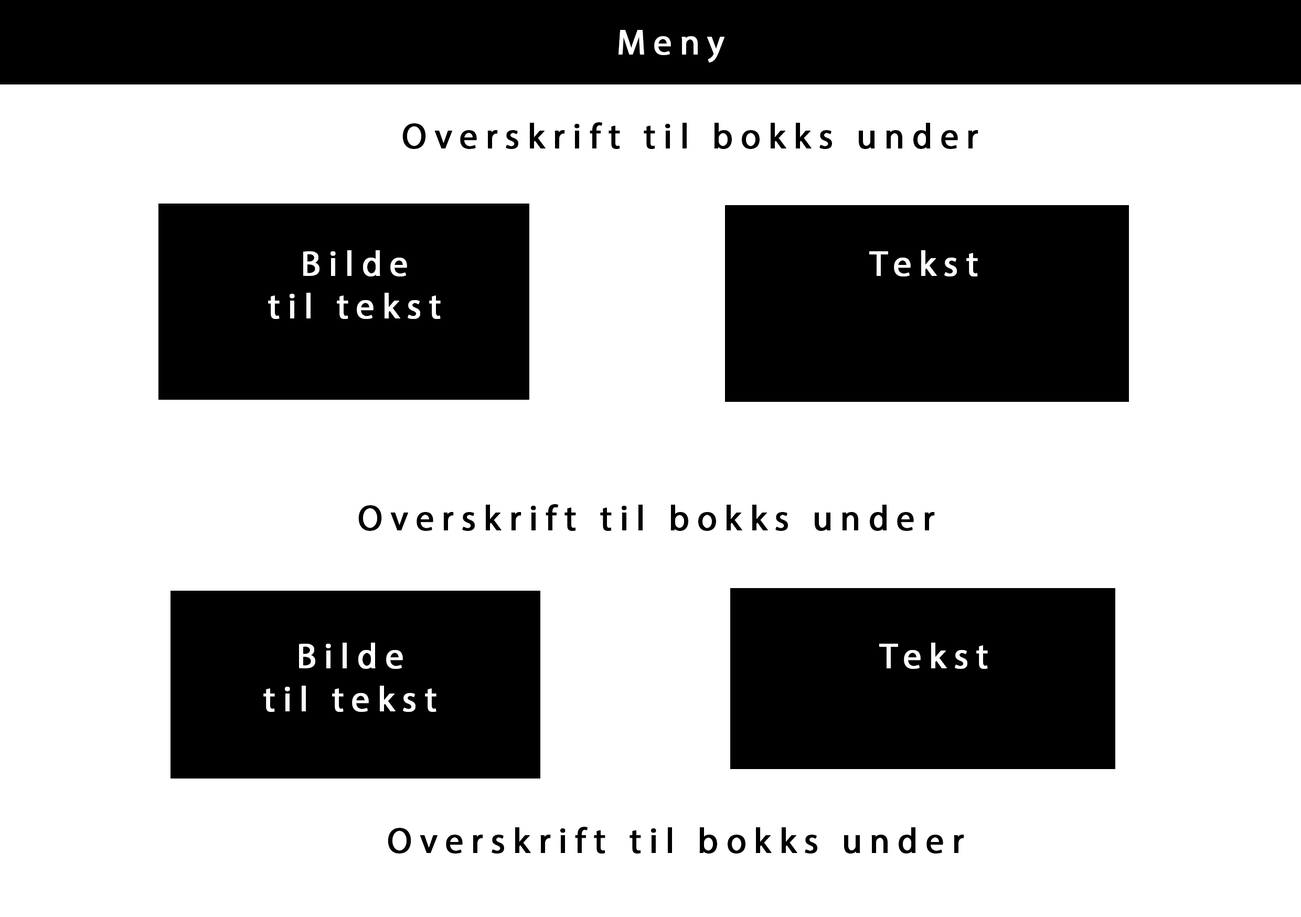
<style>
.page{position:relative;width:1301px;height:917px;background:#ffffff}
.page>*{position:absolute;margin:0}
.t1{font:35.7px "MyriadPro-Regular";letter-spacing:0.2em;color:#fefefe;font-weight:bold}
.t2{font:35.7px "MyriadPro-Regular";letter-spacing:0.2em;color:#000000;font-weight:bold}
</style>
<div class="page">
<p class="t1" style="left:618px;top:30px;width:106px;height:32px">Meny</p>
<p class="t2" style="left:402px;top:122px;width:576px;height:27px">Overskrift til bokks under</p>
<p class="t1" style="left:268px;top:250px;width:173px;height:69px;text-align:center">Bilde<br>til tekst</p>
<p class="t1" style="left:869px;top:250px;width:109px;height:26px">Tekst</p>
<p class="t2" style="left:358px;top:504px;width:577px;height:27px">Overskrift til bokks under</p>
<p class="t1" style="left:263px;top:642px;width:173px;height:70px;text-align:center">Bilde <br>til tekst</p>
<p class="t1" style="left:879px;top:642px;width:109px;height:27px">Tekst</p>
<p class="t2" style="left:388px;top:827px;width:576px;height:26px">Overskrift til bokks under</p>
</div>
